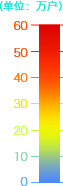
<style>
.page{position:relative;width:63px;height:186px;background:#ffffff}
.page>*{position:absolute;margin:0}
.t1{font:11px "HiraginoSansGB-W3";color:#00e9d8}
.t2{font:11px "HiraginoSansGB-W3";color:#ff4800}
.t3{font:11px "HiraginoSansGB-W3";color:#fc7800}
.t4{font:11px "HiraginoSansGB-W3";color:#f1e300}
.t5{font:11px "HiraginoSansGB-W3";color:#c7ff2e}
.t6{font:11px "HiraginoSansGB-W3";color:#82d5a4}
.t7{font:11px "HiraginoSansGB-W3";color:#4faefd}
</style>
<div class="page">
<p class="t1" style="left:0px;top:0px;width:62px;height:12px">(单位：万户）</p>
<p class="t2" style="left:14px;top:21px;width:14px;height:9px">60</p>
<p class="t2" style="left:14px;top:48px;width:14px;height:9px">50</p>
<p class="t3" style="left:13px;top:73px;width:15px;height:9px">40</p>
<p class="t4" style="left:14px;top:99px;width:14px;height:9px">30</p>
<p class="t5" style="left:14px;top:126px;width:14px;height:9px">20</p>
<p class="t6" style="left:15px;top:152px;width:13px;height:9px">10</p>
<p class="t7" style="left:20px;top:177px;width:8px;height:9px">0</p>
</div>
